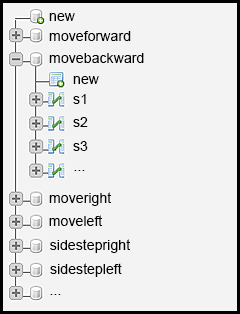
<style>
.page{position:relative;width:240px;height:314px;background:#f3f3f3}
.page>*{position:absolute;margin:0}
.t1{font:14.2px "ArialMT";color:#000000}
</style>
<div class="page">
<p class="t1" style="left:49px;top:13px;width:26px;height:8px">new</p>
<p class="t1" style="left:49px;top:31px;width:82px;height:10px">moveforward</p>
<p class="t1" style="left:49px;top:53px;width:95px;height:10px">movebackward</p>
<p class="t1" style="left:73px;top:76px;width:26px;height:8px">new</p>
<p class="t1" style="left:73px;top:94px;width:13px;height:10px">s1</p>
<p class="t1" style="left:73px;top:117px;width:15px;height:10px">s2</p>
<p class="t1" style="left:73px;top:141px;width:15px;height:10px">s3</p>
<p class="t1" style="left:74px;top:170px;width:11px;height:1px">...</p>
<p class="t1" style="left:49px;top:192px;width:63px;height:14px">moveright</p>
<p class="t1" style="left:49px;top:215px;width:54px;height:11px">moveleft</p>
<p class="t1" style="left:50px;top:239px;width:81px;height:14px">sidestepright</p>
<p class="t1" style="left:50px;top:263px;width:72px;height:14px">sidestepleft</p>
<p class="t1" style="left:50px;top:294px;width:11px;height:1px">...</p>
</div>
